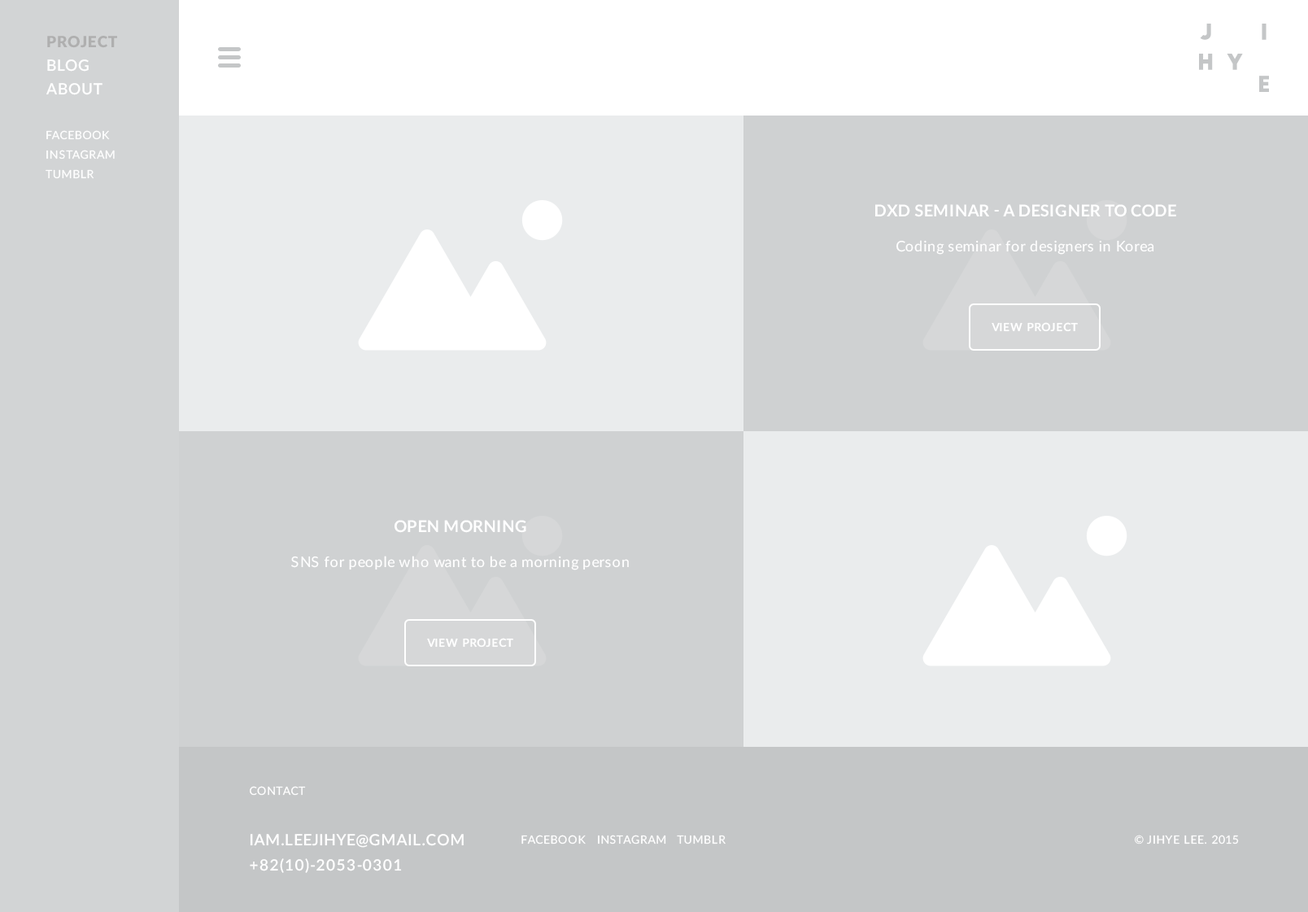
<style>
.page{position:relative;width:1308px;height:912px;background:#eaeced}
.page>*{position:absolute;margin:0}
.t1{font:11.4px/19.5px "Lato-Regular";letter-spacing:0.05em;color:#ffffff}
.t2{font:16.3px "Lato-Bold";letter-spacing:0.025em;color:#ffffff;text-transform:uppercase}
.t3{font:14.6px "Lato-Regular";letter-spacing:0.025em;color:#ffffff}
.t4{font:11.4px "Lato-Bold";letter-spacing:0.025em;color:#ffffff;text-transform:uppercase}
.t5{font:15.5px/25.2px "Lato-Semibold";letter-spacing:0.05em;color:#ffffff}
.t6{font:11.4px/25.2px "Lato-Regular";letter-spacing:0.05em;color:#ffffff}
.t7{font:11.4px "Lato-Regular";letter-spacing:0.05em;color:#ffffff}
</style>
<div class="page">
<p class="t1" style="left:46px;top:130px;width:69px;height:49px">FACEBOOK<br>INSTAGRAM<br>TUMBLR</p>
<p class="t2" style="left:875px;top:204px;width:301px;height:13px">dxd seminar - A Designer to Code</p>
<p class="t3" style="left:895px;top:240px;width:259px;height:15px">Coding seminar for designers in Korea</p>
<p class="t4" style="left:991px;top:322px;width:87px;height:10px">View Project</p>
<p class="t2" style="left:394px;top:520px;width:132px;height:13px">Open morning</p>
<p class="t3" style="left:291px;top:556px;width:338px;height:14px">SNS for people who want to be a morning person</p>
<p class="t4" style="left:427px;top:638px;width:86px;height:9px">View Project</p>
<p class="t5" style="left:250px;top:786px;width:214px;height:87px"><span class="t6">CONTACT<br><br></span>IAM.LEEJIHYE@GMAIL.COM<br>+82(10)-2053-0301</p>
<p class="t7" style="left:521px;top:834px;width:204px;height:10px">FACEBOOK   INSTAGRAM   TUMBLR</p>
<p class="t7" style="left:1135px;top:834px;width:104px;height:10px">© JIHYE LEE. 2015</p>
</div>
